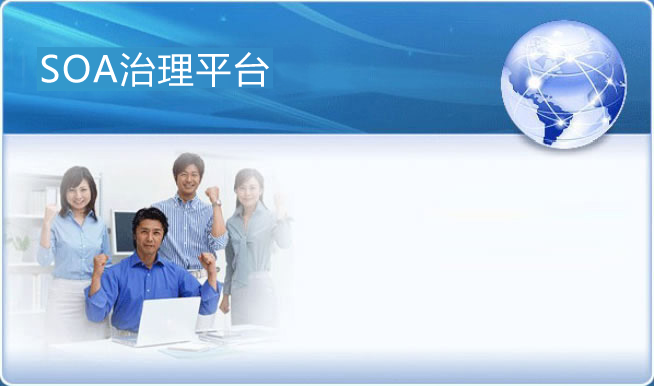
<style>
.page{position:relative;width:654px;height:386px}
.page>*{position:absolute;margin:0}
.t1{font:36px "MicrosoftYaHei";letter-spacing:0.05em;color:#ffffff}
</style>
<div class="page">
<p class="t1" style="left:41px;top:52px;width:228px;height:35px">SOA治理平台</p>
</div>
